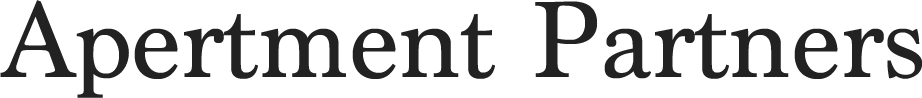
<style>
.page{position:relative;width:922px;height:98px;background:#ffffff}
.page>*{position:absolute;margin:0}
.t1{font:113.3px "Marion-Regular";color:#222222}
</style>
<div class="page">
<p class="t1" style="left:0px;top:0px;width:922px;height:98px">Apertment Partners</p>
</div>
